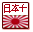
<style>
.page{position:relative;width:33px;height:32px;background:#ffffff}
.page>*{position:absolute;margin:0}
.t1{font:10.4px "SimSun";letter-spacing:-0.25em;color:#ae0012}
</style>
<div class="page">
<p class="t1" style="left:4px;top:4px;width:23px;height:9px">日本十</p>
</div>
